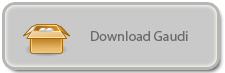
<style>
.page{position:relative;width:225px;height:73px;background:#c9c9c9}
.page>*{position:absolute;margin:0}
.t1{font:14px "MyriadPro-Regular";color:#6a6a6a}
</style>
<div class="page">
<p class="t1" style="left:91px;top:31px;width:97px;height:10px">Download Gaudi</p>
</div>
